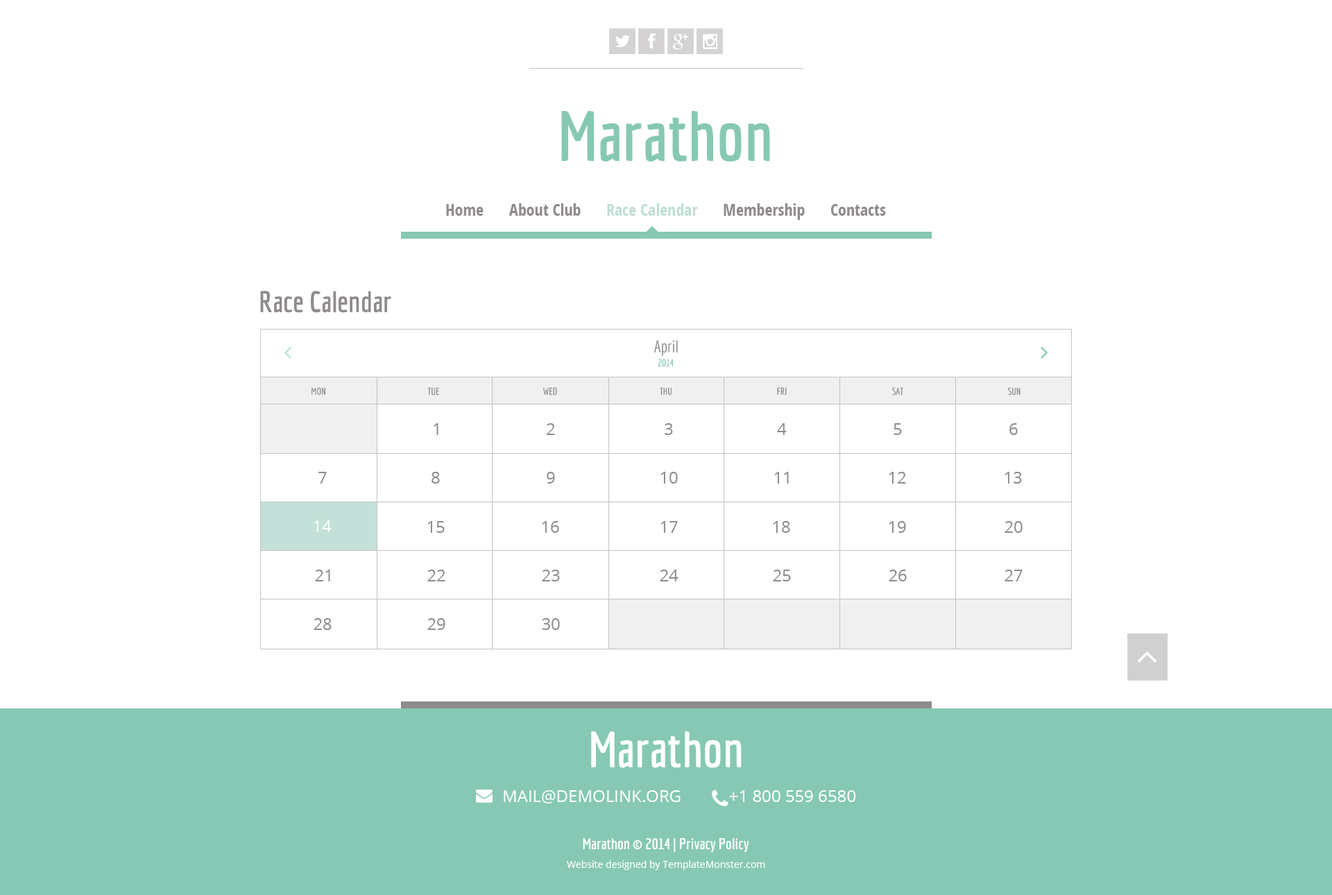
<style>
.page{position:relative;width:1332px;height:895px;background:#ffffff}
.page>*{position:absolute;margin:0}
.t1{font:69.4px "Economica-Bold";color:#86c8b4}
.t2{font:16.7px "OpenSans-CondensedBold";color:#908b8b}
.t3{font:16.7px "OpenSans-CondensedBold";color:#bfdfd5}
.t4{font:29.1px "Economica-Bold";color:#908b8b}
.t5{font:16.7px/13.9px "Economica-Regular";color:#908b8b}
.t6{font:9.7px/13.9px "Economica-Regular";color:#86c8b4}
.t7{font:9.7px "Economica-Regular";color:#908b8b}
.t8{font:16.7px "OpenSans";color:#908b8b}
.t9{font:16.7px "OpenSans";color:#ffffff}
.t10{font:50px "Economica-Bold";color:#ffffff}
.t11{font:15.3px "Economica-Bold";color:#ffffff}
.t12{font:9.7px "OpenSans";color:#ffffff}
</style>
<div class="page">
<p class="t1" style="left:561px;top:111px;width:209px;height:51px">Marathon</p>
<p class="t2" style="left:446px;top:204px;width:38px;height:12px">Home</p>
<p class="t2" style="left:509px;top:203px;width:72px;height:13px">About Club</p>
<p class="t3" style="left:607px;top:203px;width:91px;height:13px">Race Calendar</p>
<p class="t2" style="left:724px;top:203px;width:81px;height:17px">Membership</p>
<p class="t2" style="left:831px;top:204px;width:55px;height:12px">Contacts</p>
<p class="t4" style="left:260px;top:291px;width:131px;height:22px">Race Calendar</p>
<p class="t5" style="left:654px;top:340px;width:24px;height:27px;text-align:center">April<br><span class="t6">2014</span></p>
<p class="t7" style="left:312px;top:387px;width:13px;height:8px">MON</p>
<p class="t7" style="left:427px;top:387px;width:12px;height:8px">TUE</p>
<p class="t7" style="left:543px;top:387px;width:14px;height:8px">WED</p>
<p class="t7" style="left:660px;top:387px;width:12px;height:8px">THU</p>
<p class="t7" style="left:777px;top:387px;width:10px;height:8px">FRI</p>
<p class="t7" style="left:892px;top:387px;width:11px;height:8px">SAT</p>
<p class="t7" style="left:1008px;top:387px;width:13px;height:8px">SUN</p>
<p class="t8" style="left:434px;top:423px;width:5px;height:12px">1</p>
<p class="t8" style="left:547px;top:423px;width:8px;height:12px">2</p>
<p class="t8" style="left:665px;top:423px;width:8px;height:12px">3</p>
<p class="t8" style="left:777px;top:423px;width:10px;height:12px">4</p>
<p class="t8" style="left:894px;top:423px;width:8px;height:12px">5</p>
<p class="t8" style="left:1010px;top:423px;width:8px;height:12px">6</p>
<p class="t8" style="left:318px;top:472px;width:9px;height:12px">7</p>
<p class="t8" style="left:432px;top:472px;width:8px;height:12px">8</p>
<p class="t8" style="left:547px;top:472px;width:8px;height:12px">9</p>
<p class="t8" style="left:661px;top:472px;width:17px;height:12px">10</p>
<p class="t8" style="left:774px;top:472px;width:15px;height:12px">11</p>
<p class="t8" style="left:889px;top:472px;width:17px;height:12px">12</p>
<p class="t8" style="left:1005px;top:472px;width:17px;height:12px">13</p>
<p class="t9" style="left:314px;top:520px;width:18px;height:12px">14</p>
<p class="t8" style="left:427px;top:521px;width:18px;height:12px">15</p>
<p class="t8" style="left:542px;top:521px;width:17px;height:12px">16</p>
<p class="t8" style="left:661px;top:521px;width:17px;height:12px">17</p>
<p class="t8" style="left:773px;top:521px;width:17px;height:12px">18</p>
<p class="t8" style="left:889px;top:521px;width:17px;height:12px">19</p>
<p class="t8" style="left:1005px;top:521px;width:18px;height:12px">20</p>
<p class="t8" style="left:315px;top:570px;width:15px;height:11px">21</p>
<p class="t8" style="left:427px;top:570px;width:18px;height:11px">22</p>
<p class="t8" style="left:542px;top:570px;width:18px;height:11px">23</p>
<p class="t8" style="left:660px;top:570px;width:19px;height:11px">24</p>
<p class="t8" style="left:773px;top:570px;width:18px;height:11px">25</p>
<p class="t8" style="left:889px;top:570px;width:18px;height:11px">26</p>
<p class="t8" style="left:1005px;top:570px;width:18px;height:11px">27</p>
<p class="t8" style="left:314px;top:618px;width:18px;height:12px">28</p>
<p class="t8" style="left:427px;top:618px;width:18px;height:12px">29</p>
<p class="t8" style="left:542px;top:618px;width:18px;height:12px">30</p>
<p class="t10" style="left:591px;top:731px;width:151px;height:37px">Marathon</p>
<p class="t9" style="left:504px;top:790px;width:352px;height:13px">MAIL@DEMOLINK.ORG           +1 800 559 6580</p>
<p class="t11" style="left:583px;top:837px;width:166px;height:16px">Marathon © 2014 | Privacy Policy</p>
<p class="t12" style="left:567px;top:860px;width:198px;height:10px">Website designed by TemplateMonster.com</p>
</div>
